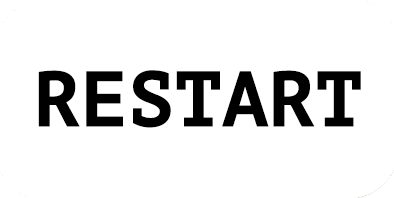
<style>
.page{position:relative;width:394px;height:198px;background:#ffffff}
.page>*{position:absolute;margin:0}
.t1{font:78.2px "PTMono-Bold";color:#000000}
</style>
<div class="page">
<p class="t1" style="left:38px;top:70px;width:323px;height:58px">RESTART</p>
</div>
